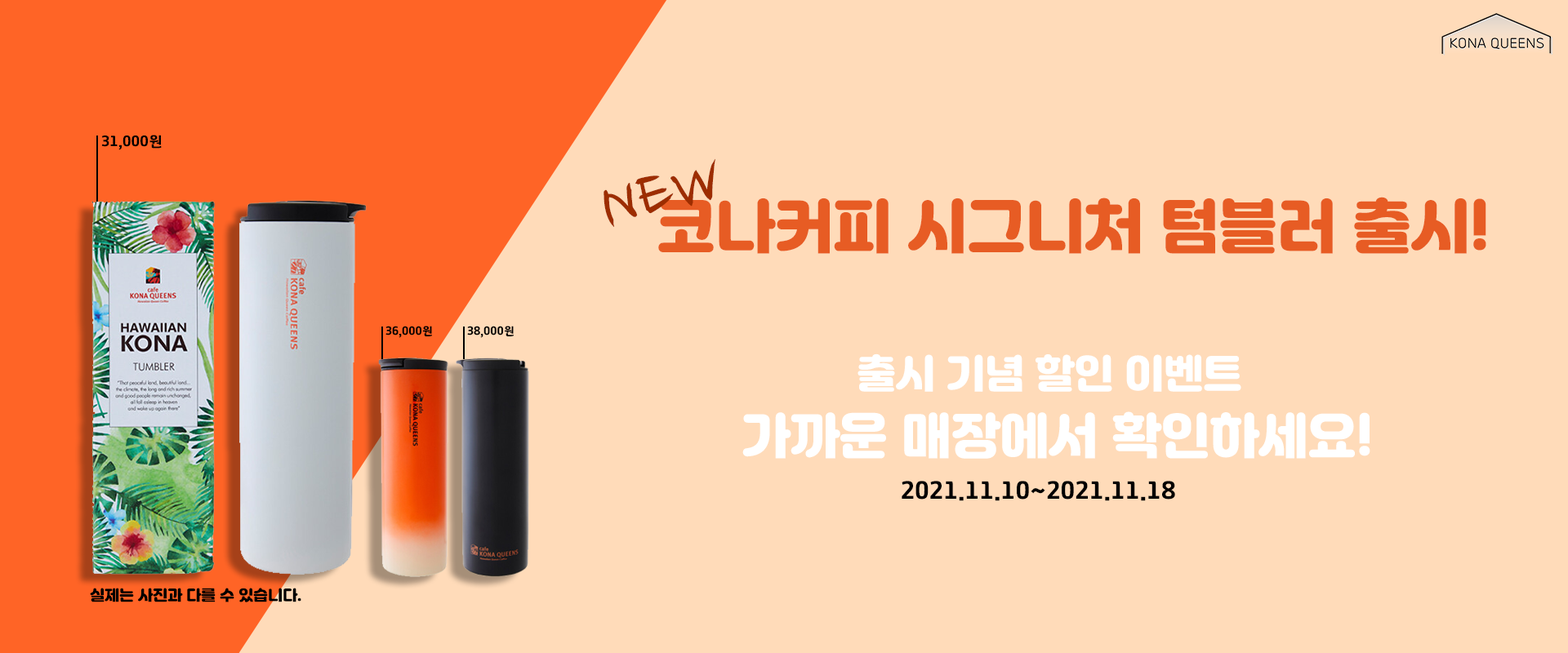
<style>
.page{position:relative;width:1568px;height:653px;background:#ffdbb9}
.page>*{position:absolute;margin:0}
.t1{font:14.7px "GyeonggiTitleV";color:#000000}
.t2{font:76.4px "NanumBrush";color:#9d2d00}
.t3{font:58.8px "JalnanOTF";color:#e75c24}
.t4{font:11.4px "GyeonggiTitleV";color:#000000}
.t5{font:39.2px "JalnanOTF";color:#ffffff}
.t6{font:49px "JalnanOTF";color:#ffffff}
.t7{font:24.5px "GyeonggiTitleV";color:#000000}
.t8{font:14.7px "JalnanOTF";color:#000000}
</style>
<div class="page">
<p class="t1" style="left:101px;top:135px;width:61px;height:15px">31,000원</p>
<p class="t2" style="left:604px;top:158px;width:111px;height:69px;rotate:-14deg">NEW</p>
<p class="t3" style="left:658px;top:197px;width:828px;height:57px">코나커피 시그니처 텀블러 출시!</p>
<p class="t4" style="left:385px;top:326px;width:47px;height:12px">36,000원</p>
<p class="t4" style="left:467px;top:326px;width:47px;height:12px">38,000원</p>
<p class="t5" style="left:858px;top:354px;width:383px;height:38px">출시 기념 할인 이벤트</p>
<p class="t6" style="left:742px;top:412px;width:628px;height:47px">가까운 매장에서 확인하세요!</p>
<p class="t7" style="left:902px;top:481px;width:273px;height:20px">2021.11.10~2021.11.18</p>
<p class="t8" style="left:90px;top:588px;width:211px;height:15px">실제는 사진과 다를 수 있습니다.</p>
</div>
